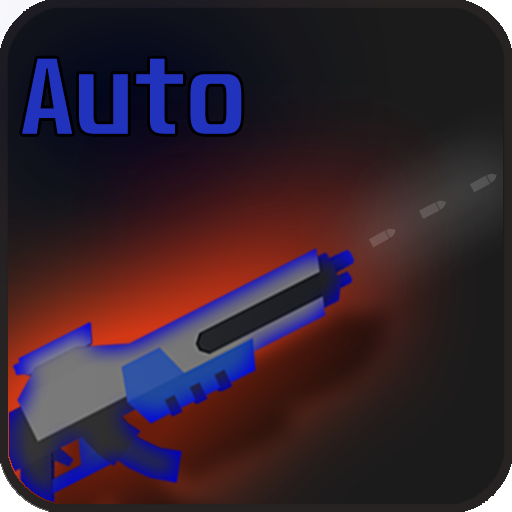
<style>
.page{position:relative;width:512px;height:512px}
.page>*{position:absolute;margin:0}
.t1{font:92.4px "Unispace-Bold";color:#2132bc}
</style>
<div class="page">
<p class="t1" style="left:22px;top:58px;width:220px;height:76px">Auto</p>
</div>
